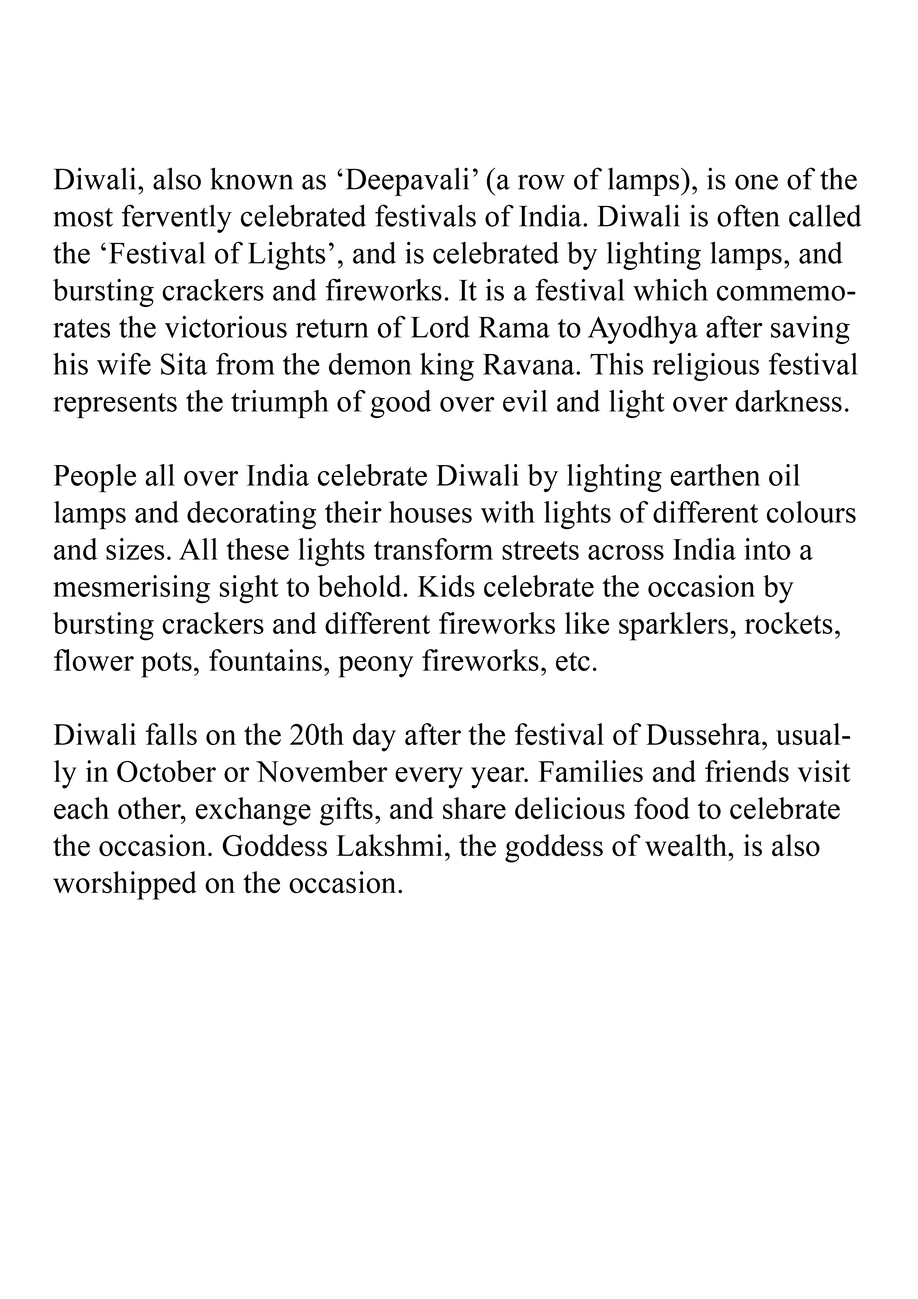
<style>
.page{position:relative;width:918px;height:1299px;background:#ffffff}
.page>*{position:absolute;margin:0}
.t1{font:30.9px "TimesNewRomanPSMT";color:#000000}
</style>
<div class="page">
<p class="t1" style="left:53px;top:168px;width:809px;height:731px">Diwali, also known as ‘Deepavali’ (a row of lamps), is one of the most fervently celebrated festivals of India. Diwali is often called the ‘Festival of Lights’, and is celebrated by lighting lamps, and bursting crackers and fireworks. It is a festival which commemorates the victorious return of Lord Rama to Ayodhya after saving his wife Sita from the demon king Ravana. This religious festival represents the triumph of good over evil and light over darkness.<br><br>People all over India celebrate Diwali by lighting earthen oil lamps and decorating their houses with lights of different colours and sizes. All these lights transform streets across India into a mesmerising sight to behold. Kids celebrate the occasion by bursting crackers and different fireworks like sparklers, rockets, flower pots, fountains, peony fireworks, etc.<br><br>Diwali falls on the 20th day after the festival of Dussehra, usually in October or November every year. Families and friends visit each other, exchange gifts, and share delicious food to celebrate the occasion. Goddess Lakshmi, the goddess of wealth, is also worshipped on the occasion.</p>
</div>
